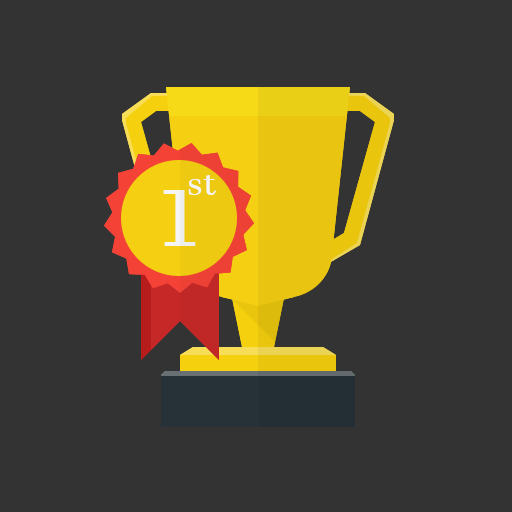
<style>
.page{position:relative;width:512px;height:512px;background:#333333}
.page>*{position:absolute;margin:0}
.t1{font:38px "JavaneseText";color:#f5f5f5}
</style>
<div class="page">
<p class="t1" style="left:188px;top:175px;width:28px;height:20px">st</p>
</div>
